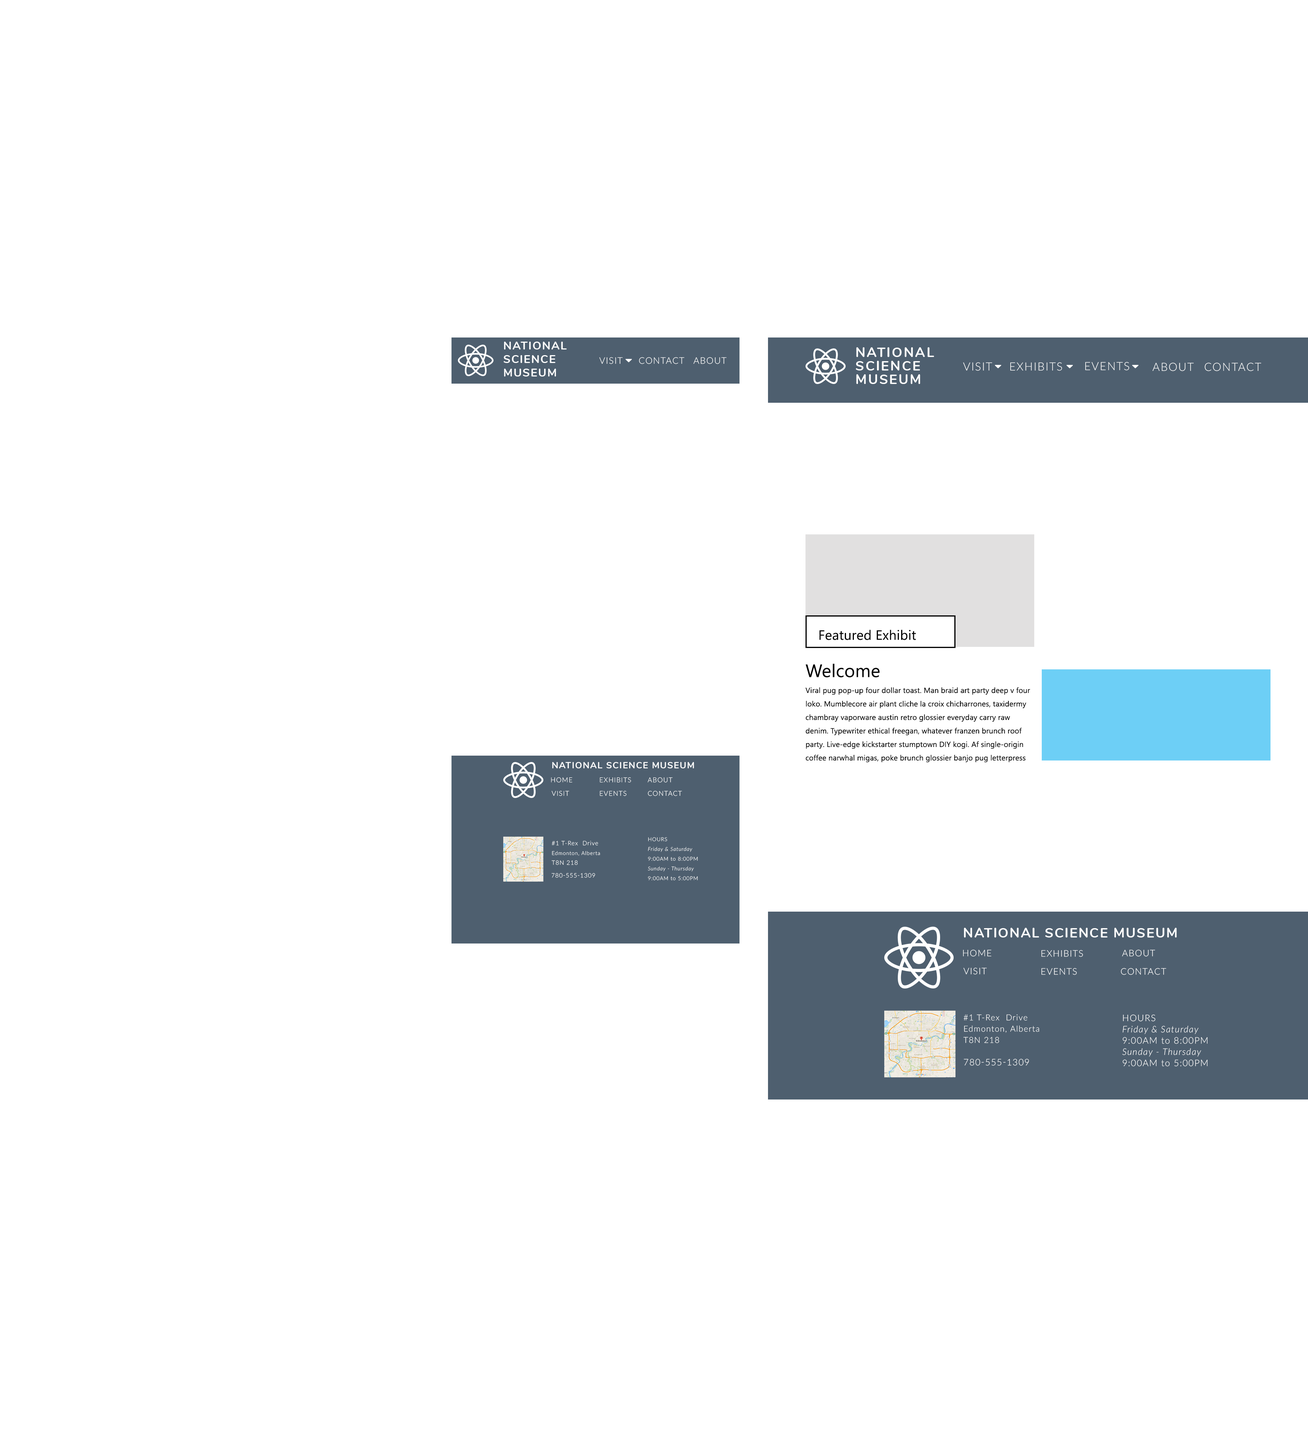
<style>
.page{position:relative;width:1308px;height:1443px;background:#ffffff}
.page>*{position:absolute;margin:0}
.t1{font:11.2px/13.5px "Nunito-Bold";letter-spacing:0.075em;color:#ffffff;text-transform:uppercase}
.t2{font:13.5px/13.5px "Nunito-Bold";letter-spacing:0.1em;color:#ffffff;text-transform:uppercase}
.t3{font:9px "Lato-Light";letter-spacing:0.075em;color:#ffffff;text-transform:uppercase}
.t4{font:11.2px "Lato-Light";letter-spacing:0.075em;color:#ffffff;text-transform:uppercase}
.t5{font:13.5px "SegoeUI";letter-spacing:0.01em;color:#000000}
.t6{font:18px "SegoeUI";letter-spacing:0.01em;color:#000000}
.t7{font:7.5px/13.5px "SegoeUI";letter-spacing:0.01em;color:#000000}
.t8{font:9px "Nunito-Bold";letter-spacing:0.075em;color:#ffffff;text-transform:uppercase}
.t9{font:6.8px "Lato-Light";letter-spacing:0.075em;color:#ffffff;text-transform:uppercase}
.t10{font:5.2px/9.8px "Lato-Light";letter-spacing:0.075em;color:#ffffff}
.t11{font:6px/9.8px "Lato-Light";letter-spacing:0.075em;color:#ffffff}
.t12{font:5.2px/9.8px "Lato-LightItalic";letter-spacing:0.075em;color:#ffffff}
.t13{font:5.2px/9.8px "Lato-Light";letter-spacing:0.075em;color:#ffffff;text-transform:uppercase}
.t14{font:6px "Lato-Light";letter-spacing:0.075em;color:#ffffff;text-transform:uppercase}
.t15{font:13.5px "Nunito-Bold";letter-spacing:0.075em;color:#ffffff;text-transform:uppercase}
.t16{font:8.2px/11.2px "Lato-Light";letter-spacing:0.075em;color:#ffffff}
.t17{font:9px/11.2px "Lato-LightItalic";letter-spacing:0.075em;color:#ffffff}
.t18{font:9px/11.2px "Lato-Light";letter-spacing:0.075em;color:#ffffff;text-transform:uppercase}
.t19{font:9px/11.2px "Lato-Light";letter-spacing:0.075em;color:#ffffff}
</style>
<div class="page">
<p class="t1" style="left:504px;top:342px;width:63px;height:34px">National<br>Science<br>Museum</p>
<p class="t2" style="left:856px;top:347px;width:78px;height:37px">National<br>Science<br>Museum</p>
<p class="t3" style="left:599px;top:357px;width:24px;height:7px">Visit</p>
<p class="t3" style="left:639px;top:357px;width:45px;height:7px">Contact</p>
<p class="t3" style="left:693px;top:357px;width:34px;height:7px">About</p>
<p class="t4" style="left:963px;top:362px;width:29px;height:9px">Visit</p>
<p class="t4" style="left:1010px;top:362px;width:52px;height:9px">Exhibits</p>
<p class="t4" style="left:1085px;top:362px;width:44px;height:8px">Events</p>
<p class="t4" style="left:1152px;top:363px;width:42px;height:8px">About</p>
<p class="t4" style="left:1204px;top:363px;width:58px;height:8px">Contact</p>
<p class="t5" style="left:819px;top:630px;width:97px;height:10px">Featured Exhibit</p>
<p class="t6" style="left:806px;top:664px;width:74px;height:14px">Welcome</p>
<p class="t7" style="left:806px;top:687px;width:224px;height:75px">Viral pug pop-up four dollar toast. Man braid art party deep v four loko. Mumblecore air plant cliche la croix chicharrones, taxidermy chambray vaporware austin retro glossier everyday carry raw denim. Typewriter ethical freegan, whatever franzen brunch roof party. Live-edge kickstarter stumptown DIY kogi. Af single-origin coffee narwhal migas, poke brunch glossier banjo pug letterpress bitters. Twee squid selfies edison bulb flannel keffiyeh, synth deep v la croix typewriter 3 wolf moon.</p>
<p class="t8" style="left:552px;top:762px;width:142px;height:6px">National Science Museum</p>
<p class="t9" style="left:551px;top:777px;width:21px;height:6px">Home</p>
<p class="t9" style="left:600px;top:777px;width:31px;height:6px">Exhibits</p>
<p class="t9" style="left:648px;top:777px;width:25px;height:6px">About</p>
<p class="t9" style="left:552px;top:790px;width:17px;height:6px">Visit</p>
<p class="t9" style="left:600px;top:790px;width:27px;height:6px">Events</p>
<p class="t9" style="left:648px;top:790px;width:34px;height:6px">Contact</p>
<p class="t10" style="left:552px;top:841px;width:48px;height:24px"><span class="t11">#1 T-Rex  Drive<br></span>Edmonton, Alberta<br><span class="t11">T8N 218</span></p>
<p class="t12" style="left:648px;top:837px;width:50px;height:43px"><span class="t13">Hours<br></span>Friday &amp; Saturday<br><span class="t10">9:00AM to 8:00PM<br></span>Sunday - Thursday<br><span class="t10">9:00AM to 5:00PM</span></p>
<p class="t14" style="left:552px;top:873px;width:43px;height:5px">780-555-1309</p>
<p class="t15" style="left:964px;top:928px;width:213px;height:10px">National Science Museum</p>
<p class="t3" style="left:963px;top:950px;width:29px;height:7px">Home</p>
<p class="t3" style="left:1041px;top:950px;width:42px;height:7px">Exhibits</p>
<p class="t3" style="left:1122px;top:950px;width:33px;height:7px">About</p>
<p class="t3" style="left:963px;top:968px;width:24px;height:7px">Visit</p>
<p class="t3" style="left:1041px;top:968px;width:36px;height:7px">Events</p>
<p class="t3" style="left:1121px;top:968px;width:45px;height:7px">Contact</p>
<p class="t16" style="left:963px;top:1014px;width:76px;height:29px">#1 T-Rex  Drive<br>Edmonton, Alberta<br>T8N 218</p>
<p class="t17" style="left:1122px;top:1014px;width:86px;height:52px"><span class="t18">Hours<br></span>Friday &amp; Saturday<br><span class="t19">9:00AM to 8:00PM<br></span>Sunday - Thursday<br><span class="t19">9:00AM to 5:00PM</span></p>
<p class="t3" style="left:964px;top:1059px;width:65px;height:7px">780-555-1309</p>
</div>
